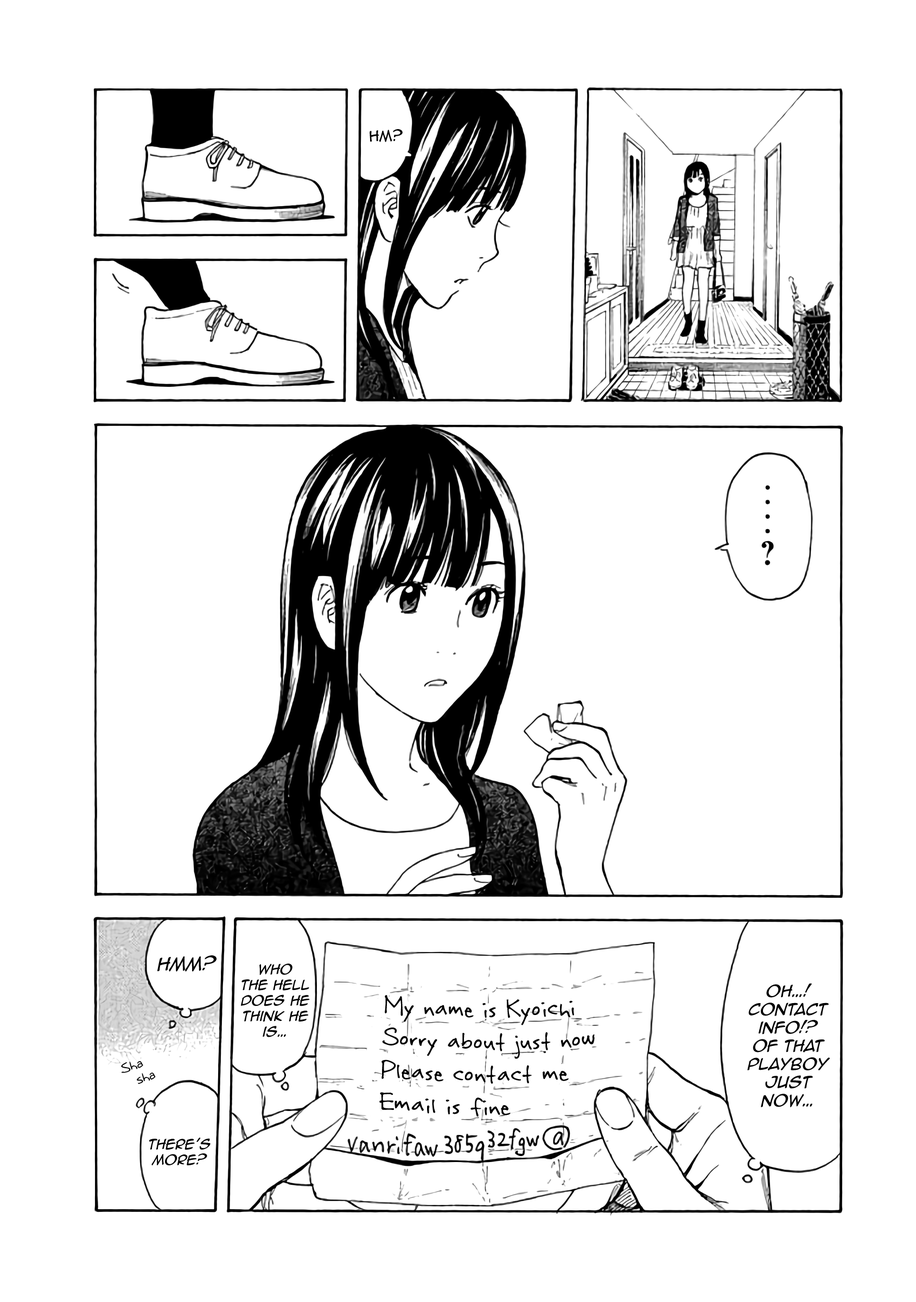
<style>
.page{position:relative;width:916px;height:1302px;background:#ffffff}
.page>*{position:absolute;margin:0}
.t1{font:13.6px "AnimeAce2.0BB";color:#000000}
.t2{font:17.4px "AnimeAce2.0BB-Italic";color:#000000}
.t3{font:13px "AnimeAce2.0BB-Italic";color:#000000}
.t4{font:15.2px "AnimeAce2.0BB-Italic";color:#000000}
.t5{font:29.8px/32.6px "Rabiohead";color:#000000}
.t6{font:12.5px "Augie";color:#000000}
</style>
<div class="page">
<p class="t1" style="left:369px;top:129px;width:34px;height:13px">Hm?</p>
<p class="t2" style="left:157px;top:955px;width:59px;height:17px">Hmm?</p>
<p class="t3" style="left:241px;top:964px;width:69px;height:73px;text-align:center">Who <br>the hell <br>does he <br>think he <br>is…</p>
<p class="t4" style="left:747px;top:983px;width:83px;height:124px;text-align:center">Oh…! <br>Contact <br>info!? <br>of that <br>playboy <br>just <br>now…</p>
<p class="t5" style="left:379px;top:995px;width:216px;height:122px;rotate:-2deg">My name is Kyoichi<br>Sorry about just now<br>Please contact me<br>Email is fine</p>
<p class="t6" style="left:121px;top:1061px;width:35px;height:24px;text-align:center;rotate:-19deg">Sha<br> sha</p>
<p class="t3" style="left:149px;top:1138px;width:62px;height:28px;text-align:center">There’s more?</p>
</div>
